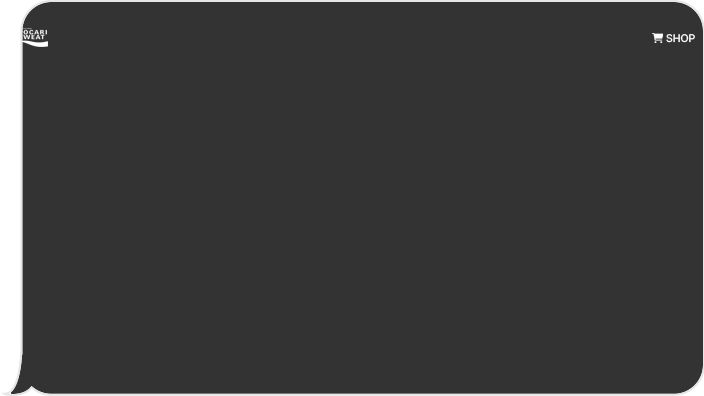
<style>
.page{position:relative;width:704px;height:396px;background:#333333}
.page>*{position:absolute;margin:0}
.t1{font:10.9px "Pretendard-Medium";color:#fffefe}
</style>
<div class="page">
<p class="t1" style="left:666px;top:34px;width:29px;height:9px">SHOP</p>
</div>
